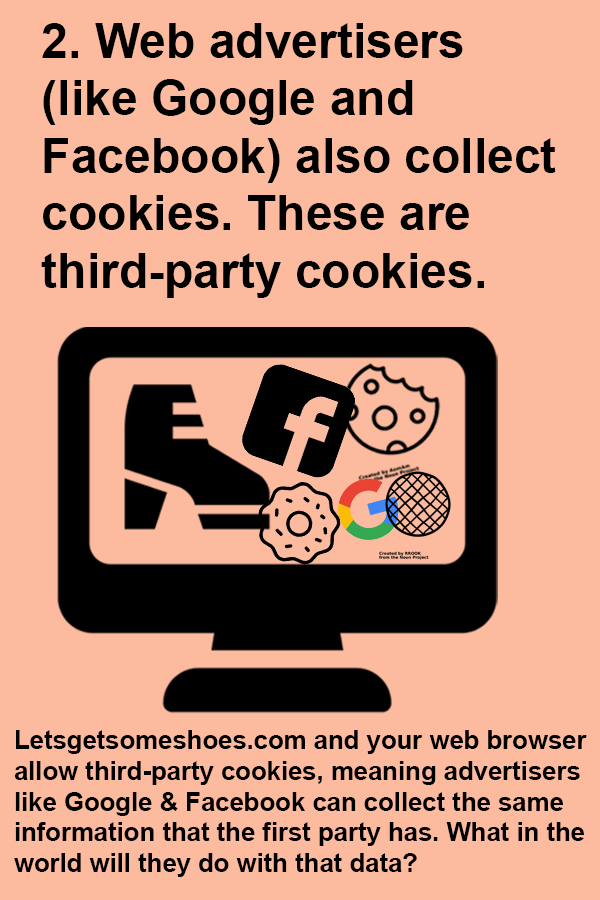
<style>
.page{position:relative;width:600px;height:900px;background:#fcbb9f}
.page>*{position:absolute;margin:0}
.t1{font:48px "Arial-BoldMT";color:#000000}
.t2{font:25.7px "Arial-BoldMT";color:#000000}
</style>
<div class="page">
<p class="t1" style="left:41px;top:23px;width:515px;height:275px">2. Web advertisers <br>(like Google and <br>Facebook) also collect <br>cookies. These are <br>third-party cookies.</p>
<p class="t2" style="left:14px;top:730px;width:573px;height:147px">Letsgetsomeshoes.com and your web browser <br>allow third-party cookies, meaning advertisers <br>like Google &amp; Facebook can collect the same <br>information that the first party has. What in the <br>world will they do with that data?</p>
</div>
